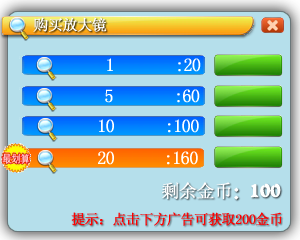
<style>
.page{position:relative;width:300px;height:240px;background:#b5dfeb}
.page>*{position:absolute;margin:0}
.t1{font:15px "NSimSun";letter-spacing:-0.05em;color:#ffffff;font-weight:bold}
.t2{font:18px "NSimSun";letter-spacing:-0.05em;color:#ffffff;font-weight:bold}
.t3{font:18px "JJianzi";letter-spacing:-0.05em;color:#ffffff;font-weight:bold}
.t4{font:14px "NSimSun";letter-spacing:-0.05em;color:#ff0000;font-weight:bold}
</style>
<div class="page">
<p class="t1" style="left:33px;top:17px;width:74px;height:15px">购买放大镜</p>
<p class="t2" style="left:107px;top:58px;width:6px;height:13px">1</p>
<p class="t2" style="left:178px;top:58px;width:23px;height:14px">:20</p>
<p class="t2" style="left:105px;top:89px;width:8px;height:14px">5</p>
<p class="t2" style="left:177px;top:89px;width:23px;height:14px">:60</p>
<p class="t2" style="left:99px;top:119px;width:15px;height:14px">10</p>
<p class="t2" style="left:168px;top:119px;width:31px;height:14px">:100</p>
<p class="t2" style="left:98px;top:151px;width:16px;height:14px">20</p>
<p class="t2" style="left:167px;top:151px;width:31px;height:14px">:160</p>
<p class="t2" style="left:162px;top:182px;width:119px;height:18px">剩余金币<span class="t3">：100</span></p>
<p class="t4" style="left:71px;top:212px;width:211px;height:14px">提示：点击下方广告可获取200金币</p>
</div>
